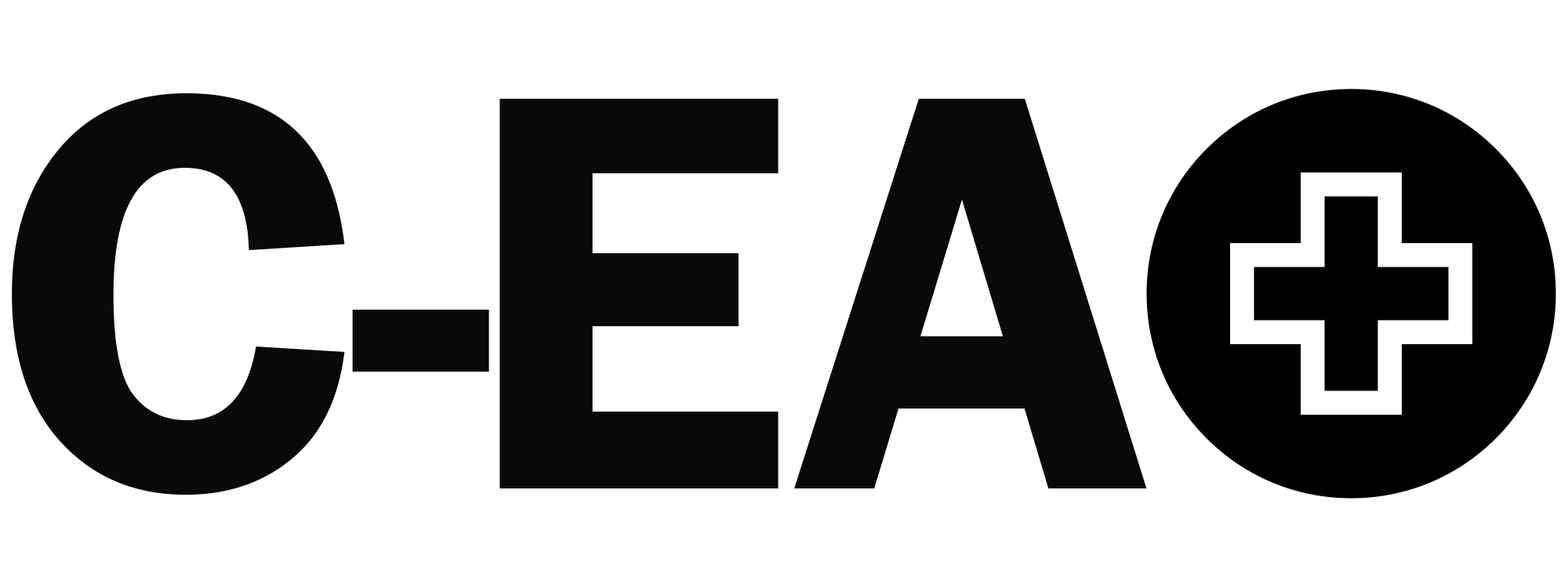
<style>
.page{position:relative;width:1568px;height:588px;background:#ffffff}
.page>*{position:absolute;margin:0}
.t1{font:583.9px "FranklinGothic-Demi";color:#090909}
.t2{font:583.9px "FranklinGothic-Demi";letter-spacing:-0.02em;color:#090909}
.t3{font:583.9px "FranklinGothic-Demi";letter-spacing:-0.06em;color:#090909}
</style>
<div class="page">
<p class="t1" style="left:12px;top:93px;width:1135px;height:402px"><span class="t2">C</span><span class="t3">-</span>EA</p>
</div>
